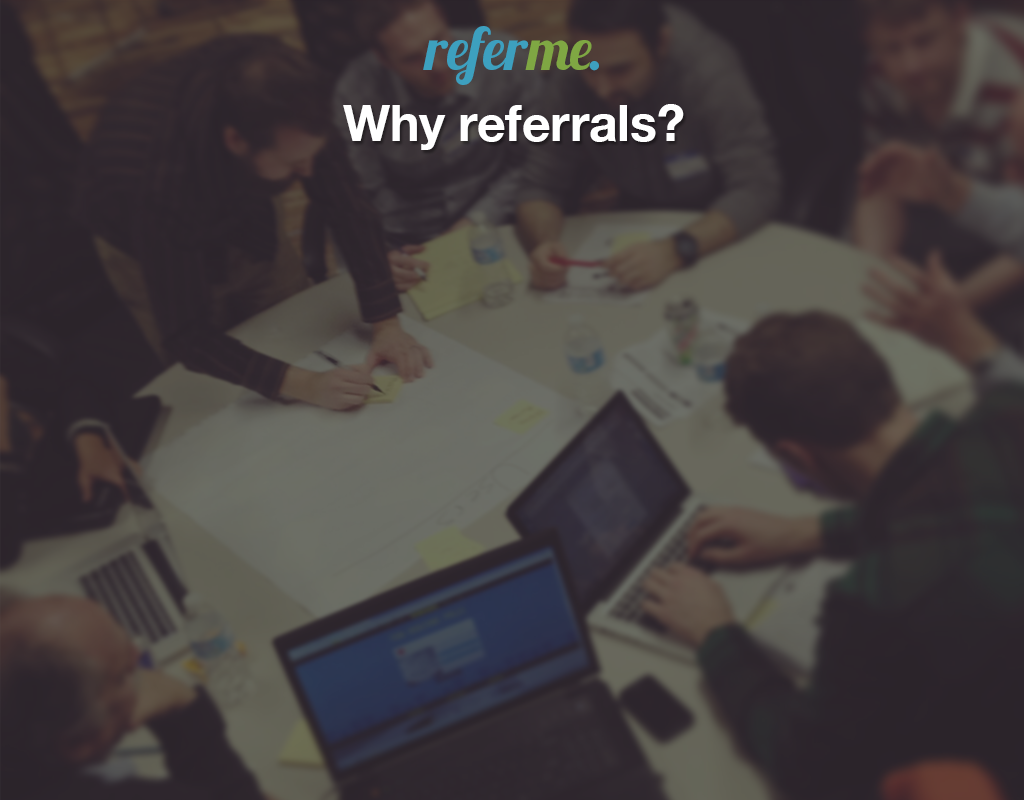
<style>
.page{position:relative;width:1024px;height:800px}
.page>*{position:absolute;margin:0}
.t1{font:58.7px "Lobster1.3";color:#3da0bf}
.t2{font:58.7px "Lobster1.3";color:#7fa743}
.t3{font:58.7px "Lobster1.3";letter-spacing:-0.075em;color:#7fa743}
.t4{font:58.7px "Lobster1.3";letter-spacing:-0.075em;color:#3da0bf}
.t5{font:50px "HelveticaNeue-Bold";color:#ffffff}
</style>
<div class="page">
<p class="t1" style="left:423px;top:26px;width:176px;height:59px">refer<span class="t2">m</span><span class="t3">e</span><span class="t4">.</span></p>
<p class="t5" style="left:343px;top:104px;width:341px;height:46px">Why referrals?</p>
</div>
